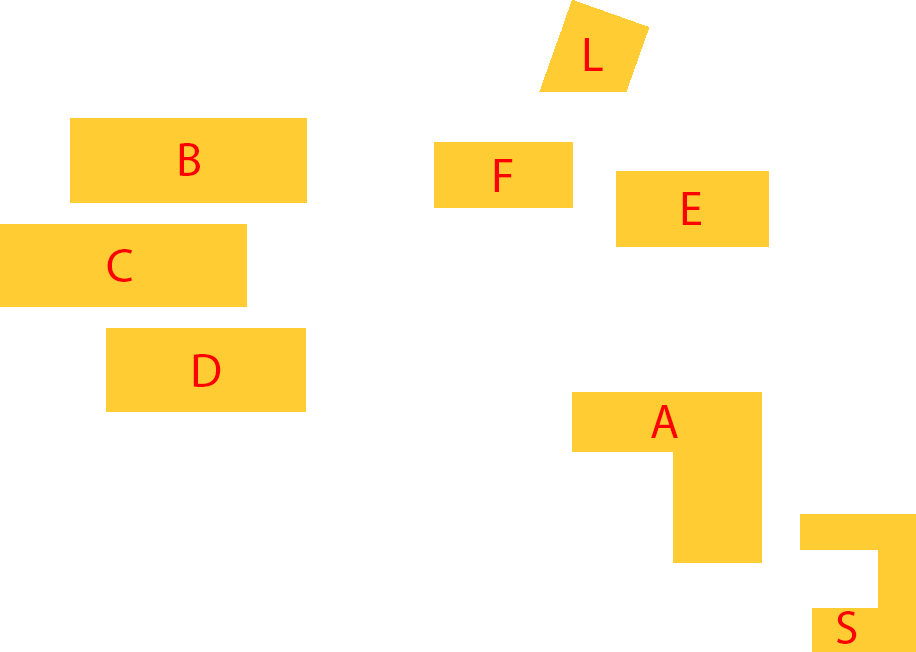
<style>
.page{position:relative;width:916px;height:652px;background:#ffffff}
.page>*{position:absolute;margin:0}
.t1{font:48px "MyriadPro-Regular";color:#ff0000}
</style>
<div class="page">
<p class="t1" style="left:584px;top:38px;width:19px;height:33px">L</p>
<p class="t1" style="left:179px;top:143px;width:21px;height:33px">B</p>
<p class="t1" style="left:494px;top:159px;width:19px;height:33px">F</p>
<p class="t1" style="left:682px;top:192px;width:19px;height:33px">E</p>
<p class="t1" style="left:107px;top:249px;width:25px;height:33px">C</p>
<p class="t1" style="left:193px;top:354px;width:28px;height:33px">D</p>
<p class="t1" style="left:651px;top:405px;width:27px;height:33px">A</p>
<p class="t1" style="left:837px;top:611px;width:20px;height:33px">S</p>
</div>
